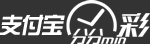
<style>
.page{position:relative;width:150px;height:44px;background:#333333}
.page>*{position:absolute;margin:0}
.t1{font:22px "HYk1gj";letter-spacing:-0.045em;color:#ffffff;font-style:italic}
</style>
<div class="page">
<p class="t1" style="left:0px;top:14px;width:65px;height:22px">支付宝</p>
</div>
